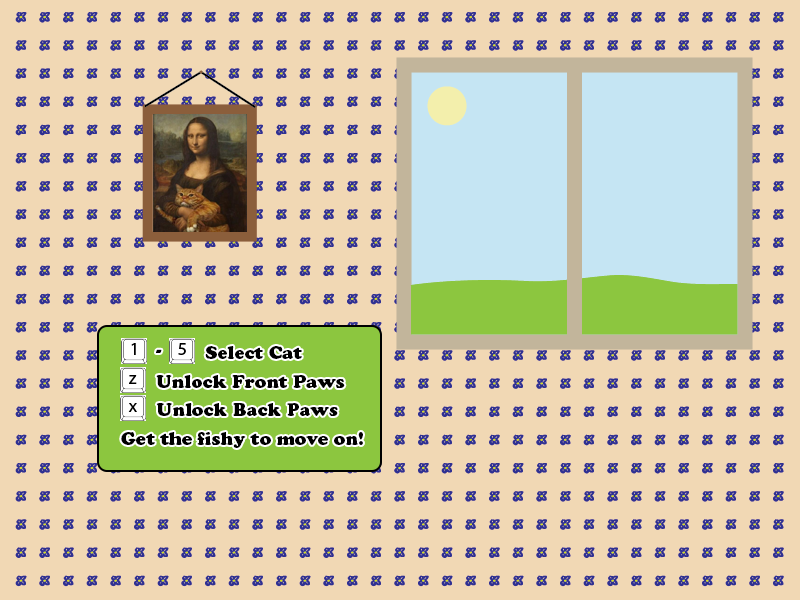
<style>
.page{position:relative;width:800px;height:600px;background:#f1d8b4}
.page>*{position:absolute;margin:0}
.t1{font:18px "CooperBlackStd";color:#000000}
</style>
<div class="page">
<p class="t1" style="left:156px;top:349px;width:6px;height:4px">-</p>
<p class="t1" style="left:205px;top:346px;width:97px;height:13px">Select Cat</p>
<p class="t1" style="left:156px;top:375px;width:189px;height:13px">Unlock Front Paws</p>
<p class="t1" style="left:156px;top:403px;width:182px;height:13px">Unlock Back Paws</p>
<p class="t1" style="left:121px;top:432px;width:242px;height:16px">Get the fishy to move on!</p>
</div>
